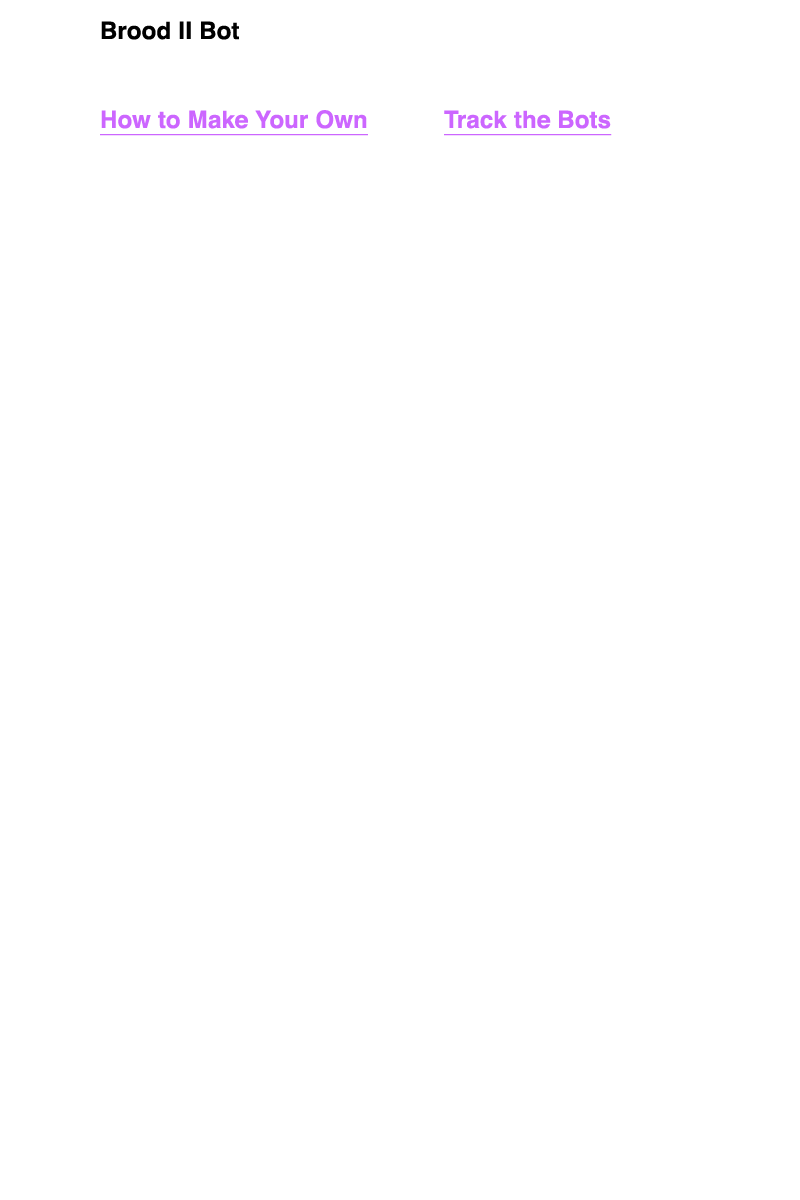
<style>
.page{position:relative;width:800px;height:1200px;background:#ffffff}
.page>*{position:absolute;margin:0}
.t1{font:24px "Helvetica-Bold";letter-spacing:0.01em;color:#000000}
.t2{font:24px "Helvetica-Bold";letter-spacing:0.01em;color:#cc66ff;text-decoration:underline}
</style>
<div class="page">
<p class="t1" style="left:101px;top:21px;width:138px;height:19px">Brood II Bot</p>
<p class="t2" style="left:100px;top:110px;width:268px;height:26px">How to Make Your Own</p>
<p class="t2" style="left:444px;top:110px;width:168px;height:26px">Track the Bots</p>
</div>
